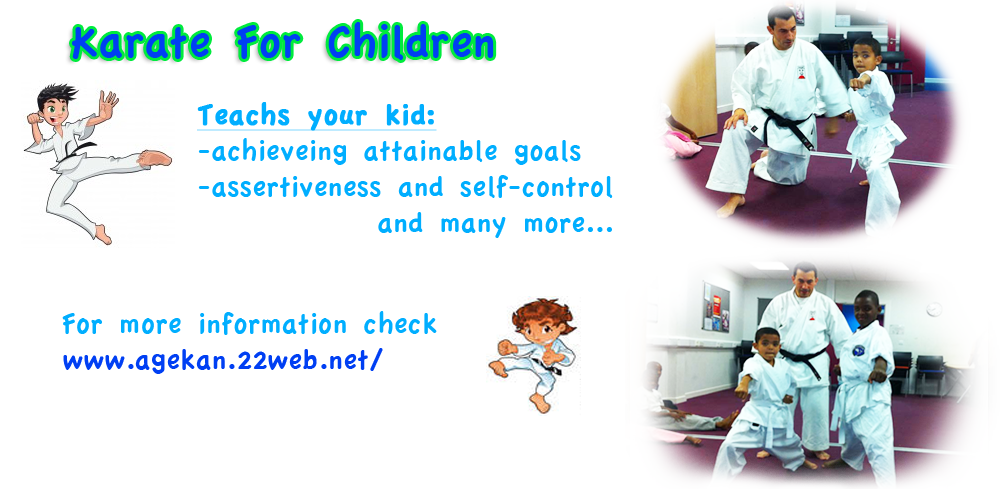
<style>
.page{position:relative;width:1000px;height:500px;background:#ffffff}
.page>*{position:absolute;margin:0}
.t1{font:48px "AppleCasual";color:#003ff3}
.t2{font:30px "AppleCasual";color:#00aeff}
.t3{font:30px "AppleCasual";color:#00aeff;font-weight:bold;text-decoration:underline}
.t4{font:30px "AppleCasual";color:#003ff3}
</style>
<div class="page">
<p class="t1" style="left:72px;top:22px;width:422px;height:38px">Karate For Children</p>
<p class="t2" style="left:197px;top:102px;width:416px;height:136px"><span class="t3">Teachs your kid:<br></span>-achieveing attainable goals<br>-assertiveness and self-control<br>     and many more...</p>
<p class="t2" style="left:62px;top:311px;width:375px;height:63px">For more information check<span class="t4"> <br>www.agekan.22web.net/</span></p>
</div>
